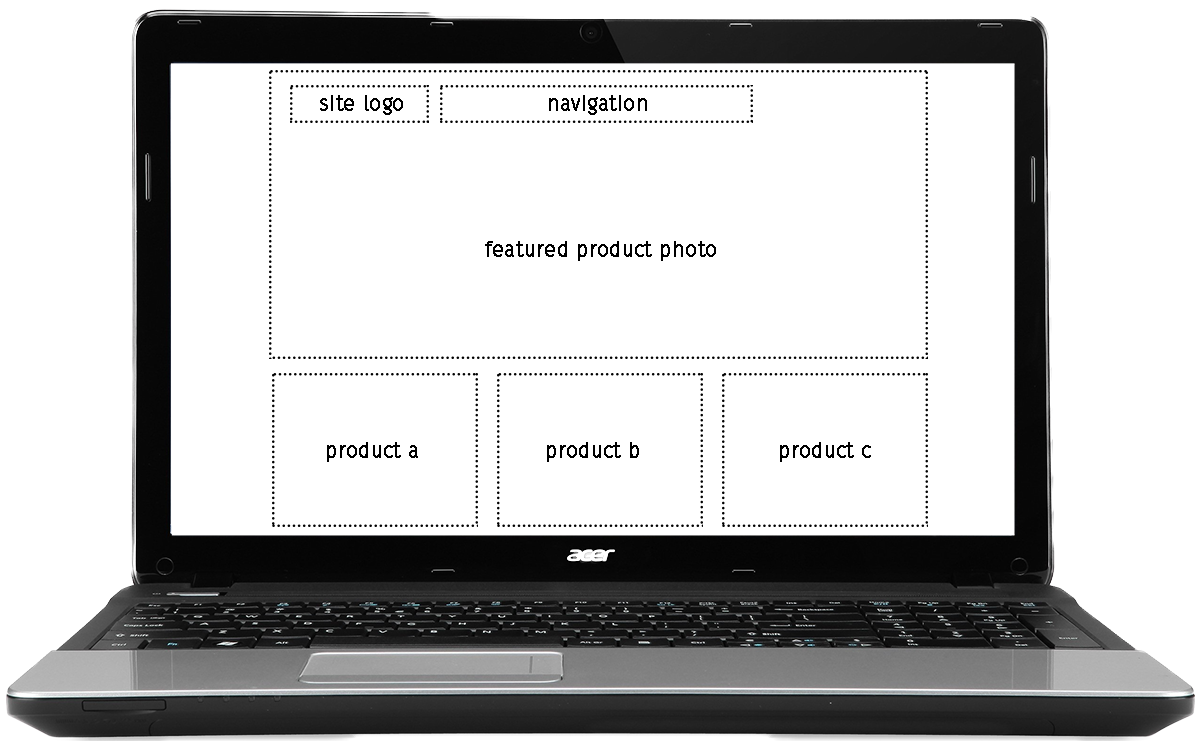
<style>
.page{position:relative;width:1200px;height:750px;background:#ffffff}
.page>*{position:absolute;margin:0}
.t1{font:20px "FiraSans-Hair";color:#000000;font-weight:bold}
</style>
<div class="page">
<p class="t1" style="left:320px;top:95px;width:83px;height:20px">site logo</p>
<p class="t1" style="left:549px;top:95px;width:98px;height:20px">navigation</p>
<p class="t1" style="left:485px;top:241px;width:231px;height:20px">featured product photo</p>
<p class="t1" style="left:327px;top:442px;width:91px;height:20px">product a</p>
<p class="t1" style="left:547px;top:442px;width:92px;height:20px">product b</p>
<p class="t1" style="left:780px;top:442px;width:91px;height:20px">product c</p>
</div>
